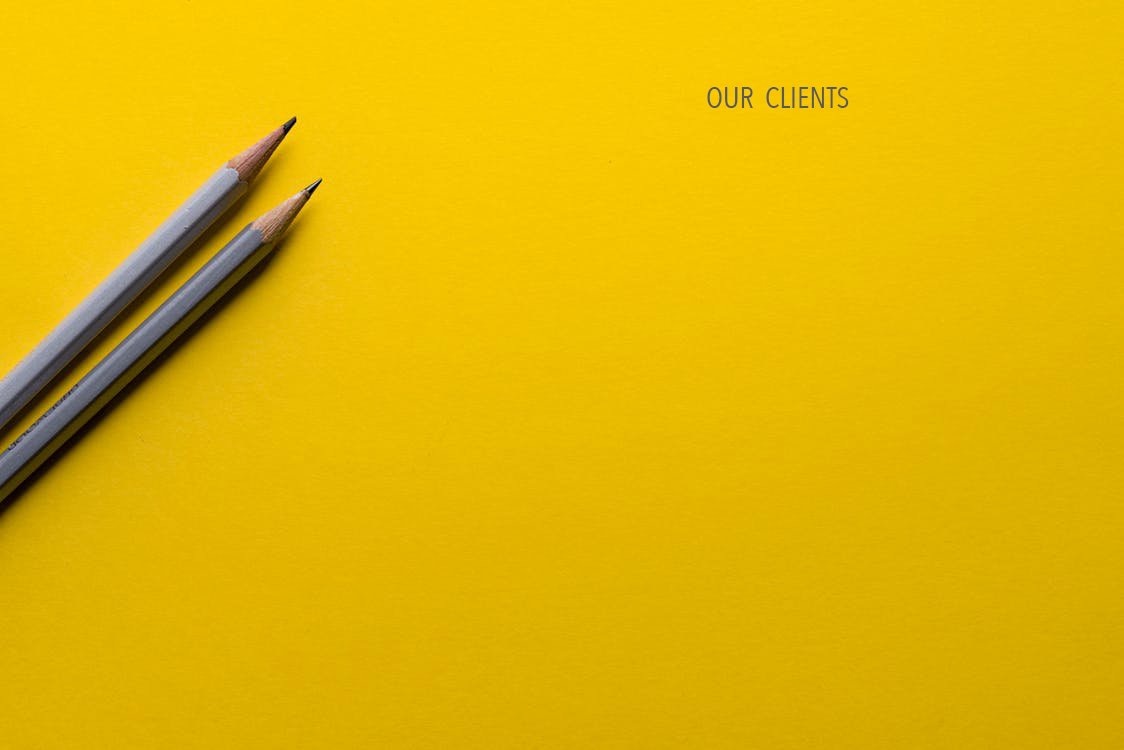
<style>
.page{position:relative;width:1124px;height:750px}
.page>*{position:absolute;margin:0}
.t1{font:30px "AvenirNextCondensed-Regular";color:#5a5959}
</style>
<div class="page">
<p class="t1" style="left:707px;top:87px;width:142px;height:21px">OUR  CLIENTS</p>
</div>
